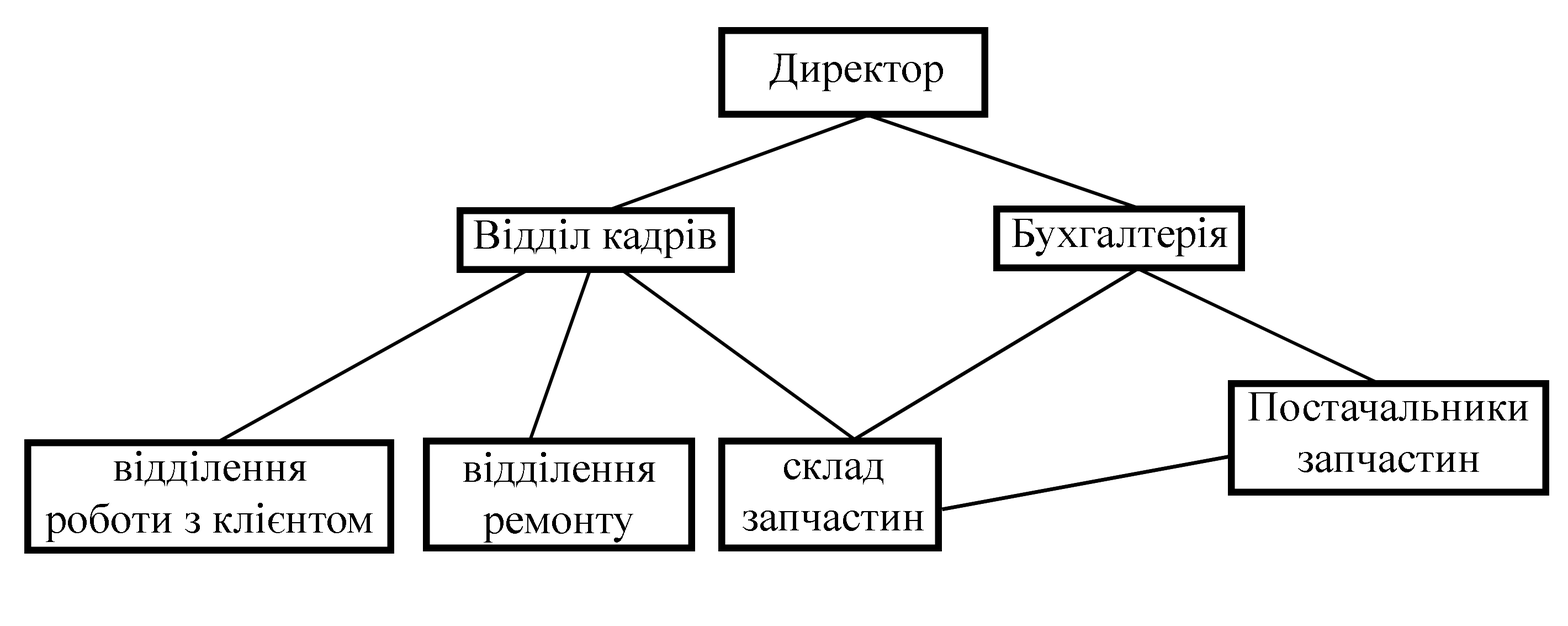
<style>
.page{position:relative;width:1568px;height:626px;background:#ffffff}
.page>*{position:absolute;margin:0}
.t1{font:42.9px "TimesNewRomanPSMT";color:#000000}
.t2{font:43.1px "TimesNewRomanPSMT";color:#000000}
</style>
<div class="page">
<p class="t1" style="left:770px;top:54px;width:173px;height:37px">Директор</p>
<p class="t1" style="left:474px;top:219px;width:242px;height:39px">Відділ кадрів</p>
<p class="t1" style="left:1012px;top:217px;width:215px;height:39px">Бухгалтерія</p>
<p class="t1" style="left:1248px;top:392px;width:280px;height:80px;text-align:center">Постачальники<br>запчастин</p>
<p class="t2" style="left:46px;top:451px;width:327px;height:91px;text-align:center">відділення<br>роботи з клієнтом</p>
<p class="t1" style="left:463px;top:452px;width:192px;height:90px;text-align:center">відділення<br>ремонту</p>
<p class="t1" style="left:743px;top:459px;width:181px;height:72px;text-align:center">склад<br>запчастин</p>
</div>
